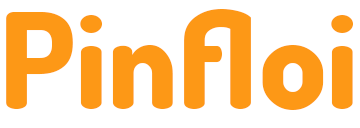
<style>
.page{position:relative;width:360px;height:128px;background:#ffffff}
.page>*{position:absolute;margin:0}
.t1{font:133.3px "Dosis-ExtraBold";color:#fd9816}
</style>
<div class="page">
<p class="t1" style="left:6px;top:9px;width:347px;height:101px">Pinfloi</p>
</div>
